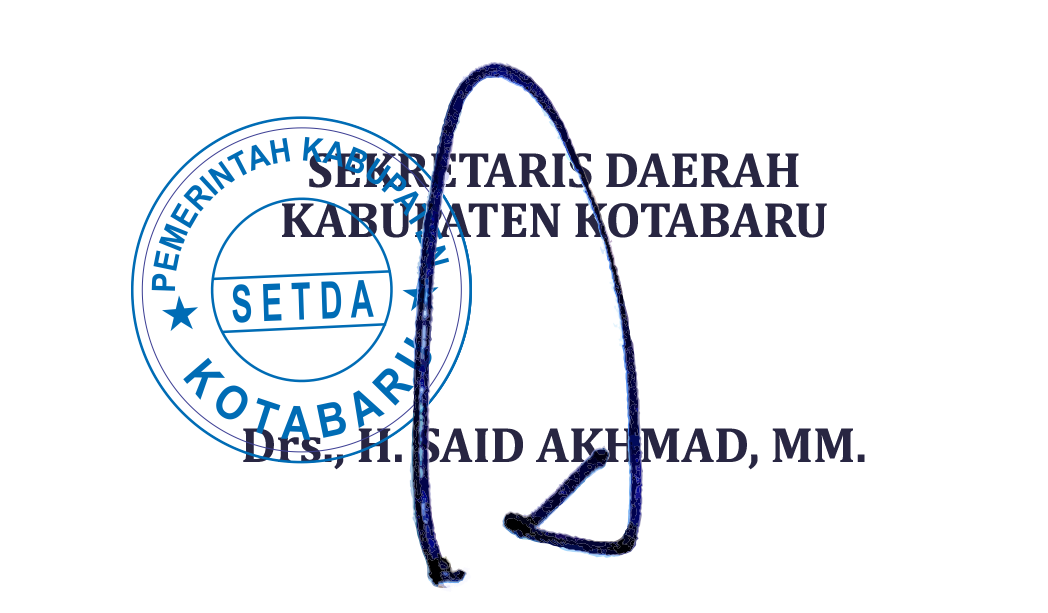
<style>
.page{position:relative;width:1048px;height:613px;background:#ffffff}
.page>*{position:absolute;margin:0}
.t1{font:50px/50px "Cambria-Bold";color:#282642;text-transform:uppercase}
.t2{font:50px/50px "Cambria-Bold";color:#282642}
</style>
<div class="page">
<p class="t1" style="left:243px;top:153px;width:622px;height:317px;text-align:center">sekretaris daerah<br>kabupaten kotabaru<br><br><br><br><br><span class="t2">Drs., H. </span>Said Akhmad,<span class="t2"> MM.</span></p>
</div>
